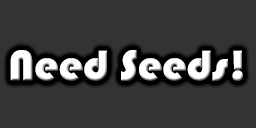
<style>
.page{position:relative;width:256px;height:128px;background:#333333}
.page>*{position:absolute;margin:0}
.t1{font:44px "Bauhaus93";color:#ffffff}
</style>
<div class="page">
<p class="t1" style="left:10px;top:50px;width:233px;height:31px">Need Seeds!</p>
</div>
